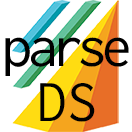
<style>
.page{position:relative;width:132px;height:132px;background:#ffffff}
.page>*{position:absolute;margin:0}
.t1{font:60.7px/55px "Inconsolata";letter-spacing:-0.05em;color:#000000}
.t2{font:60.7px/55px "Inconsolata";color:#000000}
</style>
<div class="page">
<p class="t1" style="left:5px;top:37px;width:124px;height:85px;text-align:center">parse<br><span class="t2">DS</span></p>
</div>
